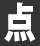
<style>
.page{position:relative;width:40px;height:46px;background:#333333}
.page>*{position:absolute;margin:0}
.t1{font:41px "KozGoPr6N-Heavy";letter-spacing:0.7em;color:#ffffff;scale:0.77 1}
</style>
<div class="page">
<p class="t1" style="left:4px;top:2px;width:32px;height:40px">点</p>
</div>
